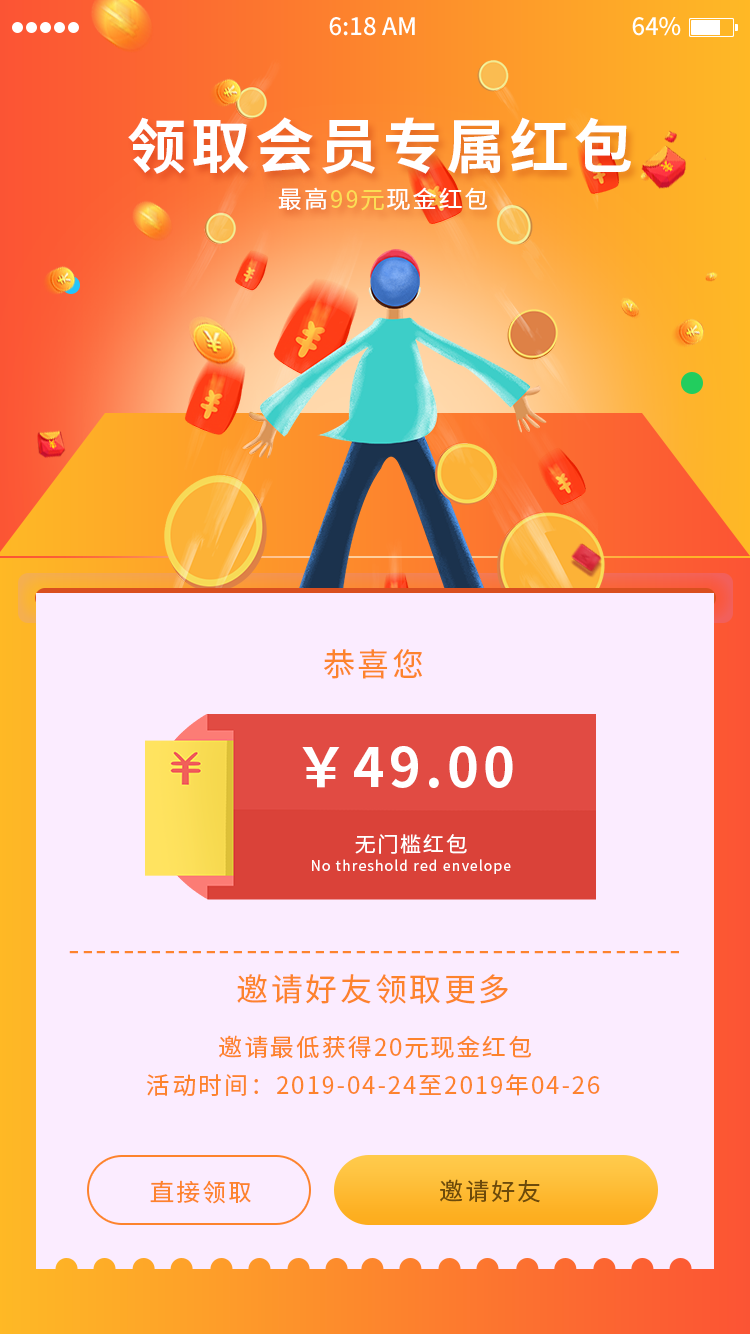
<style>
.page{position:relative;width:750px;height:1334px;background:#fbecff}
.page>*{position:absolute;margin:0}
.t1{font:59.1px "NotoSansHans-Bold";letter-spacing:0.08em;color:#ffffff}
.t2{font:24px "NotoSansHans-Regular";letter-spacing:0.08em;color:#ffffff}
.t3{font:24px "NotoSansHans-Regular";letter-spacing:0.08em;color:#fbdd55}
.t4{font:32px "NotoSansHans-Regular";letter-spacing:0.08em;color:#fd832d}
.t5{font:53.9px "NotoSansHans-Bold";letter-spacing:0.08em;color:#ffffff}
.t6{font:21.1px "NotoSansHans-Regular";letter-spacing:0.08em;color:#ffffff}
.t7{font:14px "NotoSansHans-Regular";letter-spacing:0.08em;color:#ffffff}
.t8{font:24px "NotoSansHans-Regular";letter-spacing:0.08em;color:#fd832d}
.t9{font:24px "NotoSansHans-Regular";letter-spacing:0.08em;color:#6d4a0a}
</style>
<div class="page">
<p class="t1" style="left:128px;top:117px;width:503px;height:57px">领取会员专属红包包</p>
<p class="t2" style="left:278px;top:187px;width:209px;height:24px">最高<span class="t3">99元</span>现金红包</p>
<p class="t4" style="left:324px;top:649px;width:98px;height:30px">恭喜您</p>
<p class="t5" style="left:302px;top:746px;width:211px;height:42px">￥49.00</p>
<p class="t6" style="left:355px;top:834px;width:112px;height:20px">无门槛红包</p>
<p class="t7" style="left:312px;top:859px;width:199px;height:15px">No threshold red envelope</p>
<p class="t4" style="left:69px;top:951px;width:610px;height:3px">---------------------------------------------</p>
<p class="t4" style="left:237px;top:974px;width:271px;height:30px">邀请好友领取更多</p>
<p class="t8" style="left:219px;top:1035px;width:312px;height:24px">邀请最低获得20元现金红包</p>
<p class="t8" style="left:146px;top:1074px;width:454px;height:23px">活动时间：2019-04-24至2019年04-26</p>
<p class="t8" style="left:150px;top:1180px;width:101px;height:24px">直接领取</p>
<p class="t9" style="left:440px;top:1179px;width:100px;height:24px">邀请好友</p>
</div>
